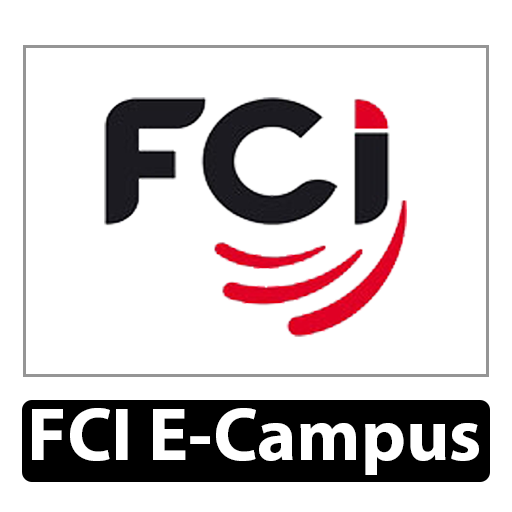
<style>
.page{position:relative;width:512px;height:512px;background:#ffffff}
.page>*{position:absolute;margin:0}
.t1{font:75px "MyriadPro-Bold";color:#ffffff}
</style>
<div class="page">
<p class="t1" style="left:32px;top:408px;width:447px;height:67px">FCI E-Campus</p>
</div>
